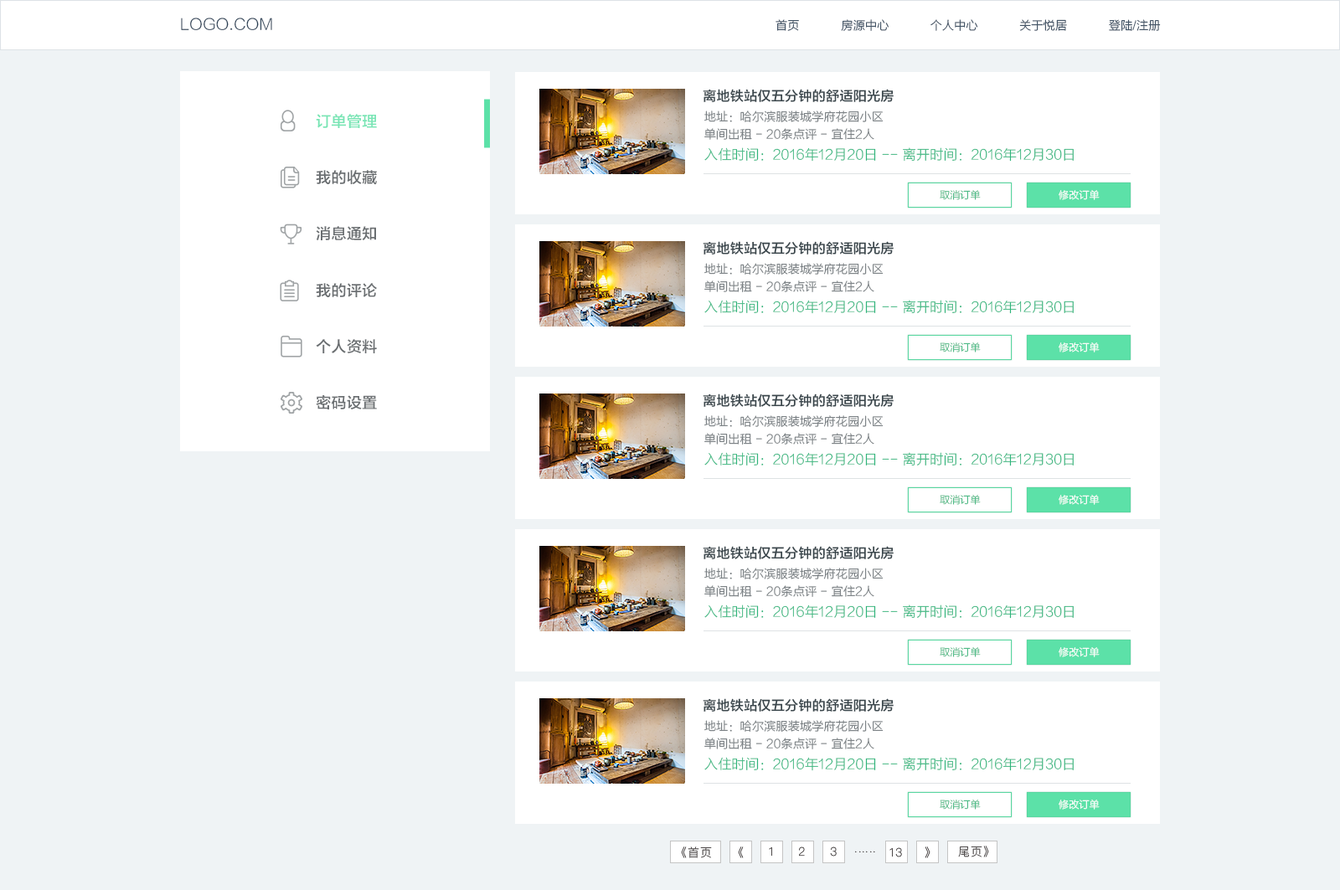
<style>
.page{position:relative;width:1340px;height:890px;background:#eff3f5}
.page>*{position:absolute;margin:0}
.t1{font:15.1px "FZLTXHK--GBK1-0";letter-spacing:0.02em;color:#2b4056}
.t2{font:11.7px "FZLTXHK--GBK1-0";letter-spacing:0.02em;color:#2b4056}
.t3{font:13.4px "FZLTZHK--GBK1-0";letter-spacing:0.02em;color:#39454b}
.t4{font:15.1px/56.2px "FZLTZHK--GBK1-0";letter-spacing:0.02em;color:#6a6e71}
.t5{font:11.7px "FZLTXHK--GBK1-0";letter-spacing:0.02em;color:#71787b}
.t6{font:13.4px "FZLTXHK--GBK1-0";letter-spacing:0.02em;color:#2eb57b}
.t7{font:10px "FZLTXHK--GBK1-0"}
.t8{font:10px "FZLTXHK--GBK1-0";color:#ffffff}
</style>
<div class="page">
<p class="t1" style="left:181px;top:18px;width:91px;height:12px">LOGO.COM</p>
<p class="t2" style="left:775px;top:19px;width:24px;height:12px">首页</p>
<p class="t2" style="left:841px;top:19px;width:47px;height:12px">房源中心</p>
<p class="t2" style="left:930px;top:19px;width:48px;height:12px">个人中心</p>
<p class="t2" style="left:1019px;top:19px;width:48px;height:12px">关于悦居</p>
<p class="t2" style="left:1109px;top:19px;width:52px;height:12px">登陆/注册</p>
<p class="t3" style="left:703px;top:89px;width:190px;height:13px">离地铁站仅五分钟的舒适阳光房</p>
<p class="t4" style="left:316px;top:114px;width:61px;height:295px;text-align:right">订单管理<br>我的收藏<br>消息通知<br>我的评论<br>个人资料<br>密码设置</p>
<p class="t5" style="left:704px;top:111px;width:179px;height:11px">地址：哈尔滨服装城学府花园小区</p>
<p class="t5" style="left:704px;top:128px;width:170px;height:12px">单间出租 - 20条点评 - 宜住2人</p>
<p class="t6" style="left:704px;top:147px;width:369px;height:15px">入住时间：2016年12月20日 -- 离开时间：2016年12月30日</p>
<p class="t7" style="left:939px;top:190px;width:41px;height:10px">取消订单</p>
<p class="t8" style="left:1058px;top:190px;width:41px;height:10px">修改订单</p>
</div>
